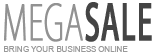
<style>
.page{position:relative;width:160px;height:54px;background:#ffffff}
.page>*{position:absolute;margin:0}
.t1{font:48px "KozGoPro-ExtraLight";letter-spacing:0.01em;color:#929292;font-weight:bold;scale:0.6 1}
.t2{font:48px "KozGoPro-Medium";letter-spacing:0.01em;color:#444444;font-weight:bold;scale:0.6 1}
.t3{font:8px "ArialMT";letter-spacing:0.01em;color:#999999;text-transform:uppercase}
</style>
<div class="page">
<p class="t1" style="left:4px;top:2px;width:148px;height:40px">MEGA<span class="t2">SALE</span></p>
<p class="t3" style="left:4px;top:46px;width:124px;height:6px">BRING your business online</p>
</div>
